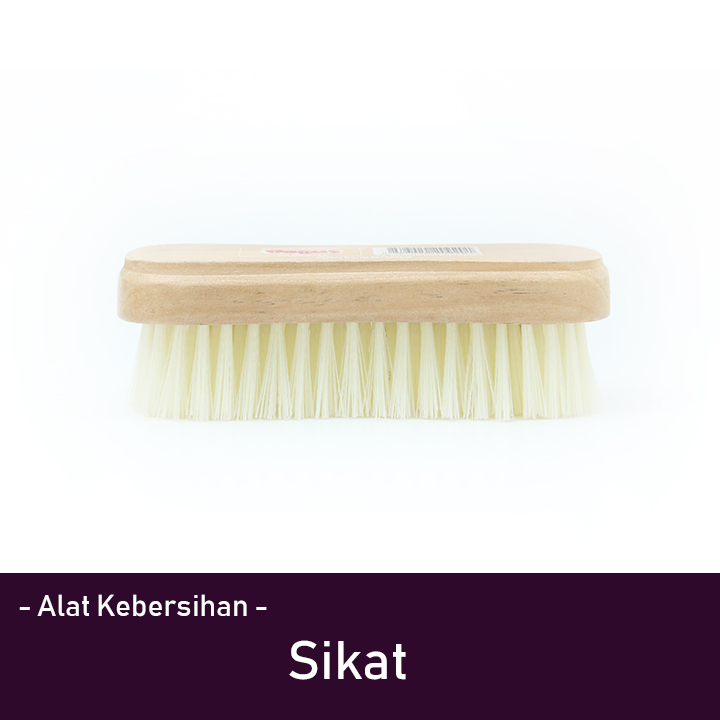
<style>
.page{position:relative;width:720px;height:720px;background:#ffffff}
.page>*{position:absolute;margin:0}
.t1{font:30px "Bahnschrift";color:#ffffff}
.t2{font:53.6px "Bahnschrift";color:#ffffff}
</style>
<div class="page">
<p class="t1" style="left:19px;top:594px;width:248px;height:23px">- Alat Kebersihan -</p>
<p class="t2" style="left:289px;top:640px;width:117px;height:40px">Sikat</p>
</div>
